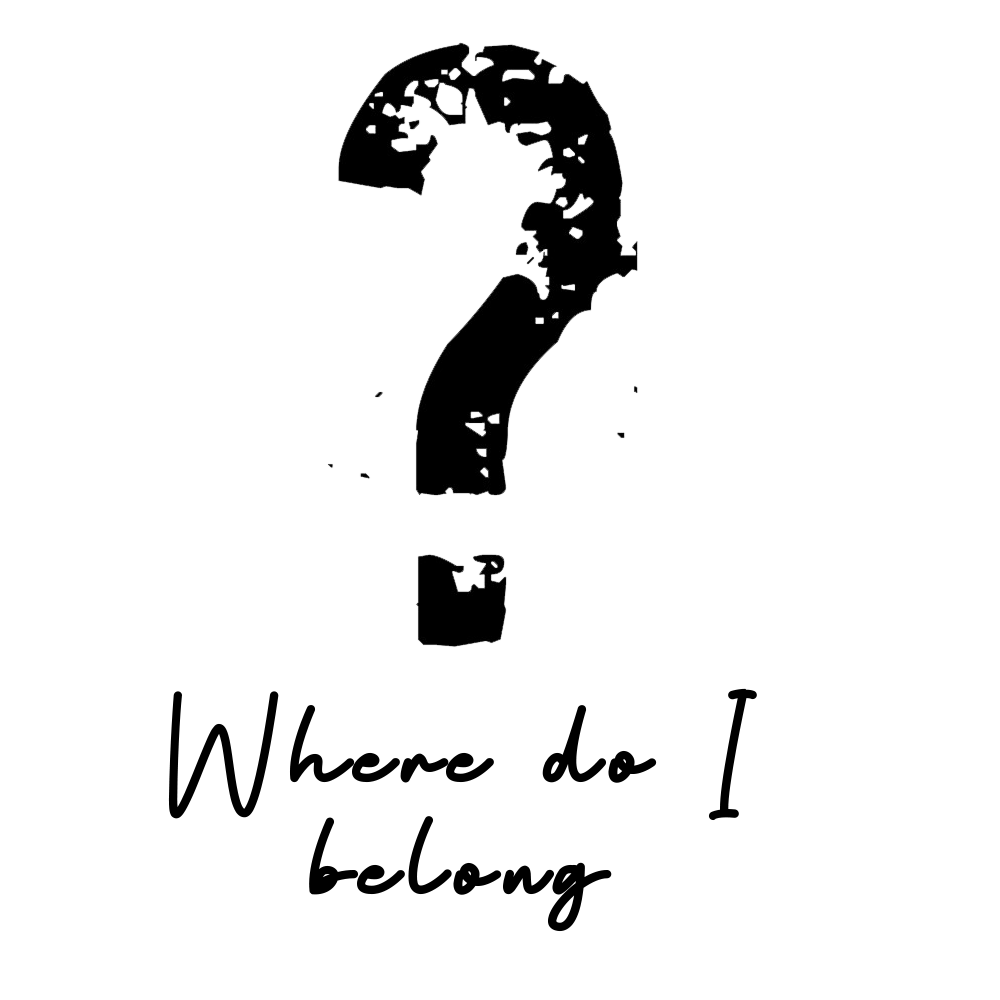
<style>
.page{position:relative;width:1000px;height:1000px;background:#ffffff}
.page>*{position:absolute;margin:0}
.t1{font:150px/112px "BagindaScript";letter-spacing:0.05em;color:#000000;font-weight:bold}
</style>
<div class="page">
<p class="t1" style="left:168px;top:688px;width:589px;height:244px;text-align:center">Where do I <br>belong</p>
</div>
